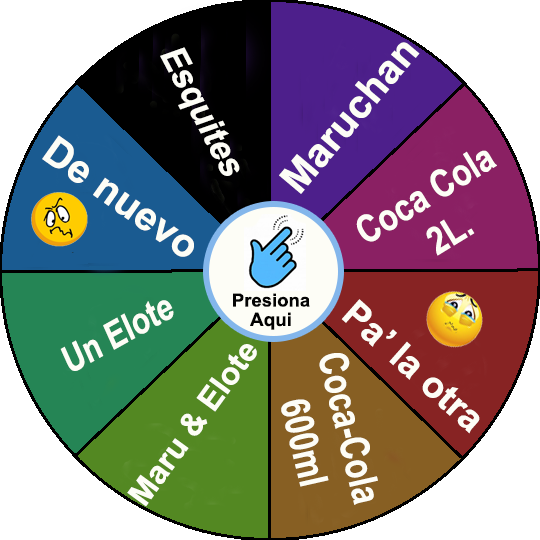
<style>
.page{position:relative;width:540px;height:540px;background:#ffffff}
.page>*{position:absolute;margin:0}
.t1{font:35.5px "Arial-BoldMT";color:#fdfdf6;scale:0.95 1}
.t2{font:40px "Arial-BoldMT";color:#fdfdf6}
.t3{font:38.2px "Arial-BoldMT";color:#fdfdf6;scale:0.83 1}
.t4{font:18.1px "Arial-BoldMT";color:#040404}
.t5{font:37.2px "Arial-BoldMT";color:#fdfdf6;scale:0.81 1}
.t6{font:36.8px "Arial-BoldMT";color:#fdfdf6}
.t7{font:18.6px "Arial-BoldMT";color:#010101}
.t8{font:32px "Arial-BoldMT";color:#fdfdf6}
.t9{font:40px "Arial-BoldMT";color:#fdfdf6;scale:0.78 1}
</style>
<div class="page">
<p class="t1" style="left:160px;top:47px;width:80px;height:129px;rotate:62deg">Esquites</p>
<p class="t2" style="left:279px;top:42px;width:141px;height:152px;rotate:-50deg">Maruchan</p>
<p class="t2" style="left:42px;top:135px;width:152px;height:122px;rotate:35deg">De nuevo</p>
<p class="t3" style="left:356px;top:150px;width:141px;height:106px;text-align:center;rotate:-31deg">Coca Cola<br>2L.</p>
<p class="t4" style="left:233px;top:293px;width:77px;height:14px">Presiona</p>
<p class="t5" style="left:60px;top:300px;width:114px;height:71px;rotate:-29deg">Un Elote</p>
<p class="t6" style="left:341px;top:299px;width:139px;height:135px;rotate:42deg">Pa’ la otra</p>
<p class="t7" style="left:250px;top:312px;width:41px;height:18px">Aqui</p>
<p class="t8" style="left:127px;top:344px;width:130px;height:163px;rotate:-54deg">Maru &amp; Elote</p>
<p class="t9" style="left:281px;top:353px;width:97px;height:152px;text-align:center;rotate:76deg">Coca-Cola<br> 600ml</p>
</div>
